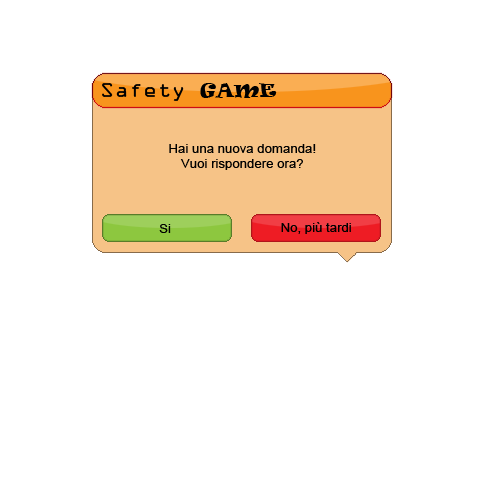
<style>
.page{position:relative;width:500px;height:500px;background:#ffffff}
.page>*{position:absolute;margin:0}
.t1{font:18px "OCRAStd";color:#000000;scale:1.1 1}
.t2{font:18px "Ravie";color:#000000;scale:1.1 1}
.t3{font:12px "ArialMT";color:#000000;scale:1.1 1}
</style>
<div class="page">
<p class="t1" style="left:102px;top:83px;width:175px;height:18px">Safety <span class="t2">GAME</span></p>
<p class="t3" style="left:169px;top:144px;width:147px;height:26px;text-align:center">Hai una nuova domanda!<br>Vuoi rispondere ora?</p>
<p class="t3" style="left:281px;top:222px;width:70px;height:12px">No, più tardi</p>
<p class="t3" style="left:159px;top:224px;width:12px;height:9px">Si</p>
</div>
